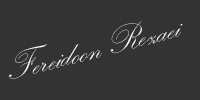
<style>
.page{position:relative;width:200px;height:100px;background:#333333}
.page>*{position:absolute;margin:0}
.t1{font:37.1px "KunstlerScript";color:#fdfcfc}
</style>
<div class="page">
<p class="t1" style="left:8px;top:21px;width:175px;height:58px;rotate:-14deg">Fereidoon Rezaei</p>
</div>
